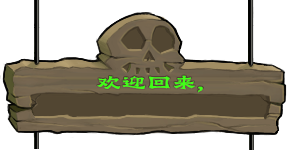
<style>
.page{position:relative;width:293px;height:150px;background:#ffffff}
.page>*{position:absolute;margin:0}
.t1{font:18.1px "GraveBustedStoneLishuSCRoughlyC";color:#41ff17;scale:1.54 1}
</style>
<div class="page">
<p class="t1" style="left:97px;top:75px;width:106px;height:18px">欢迎回来,</p>
</div>
